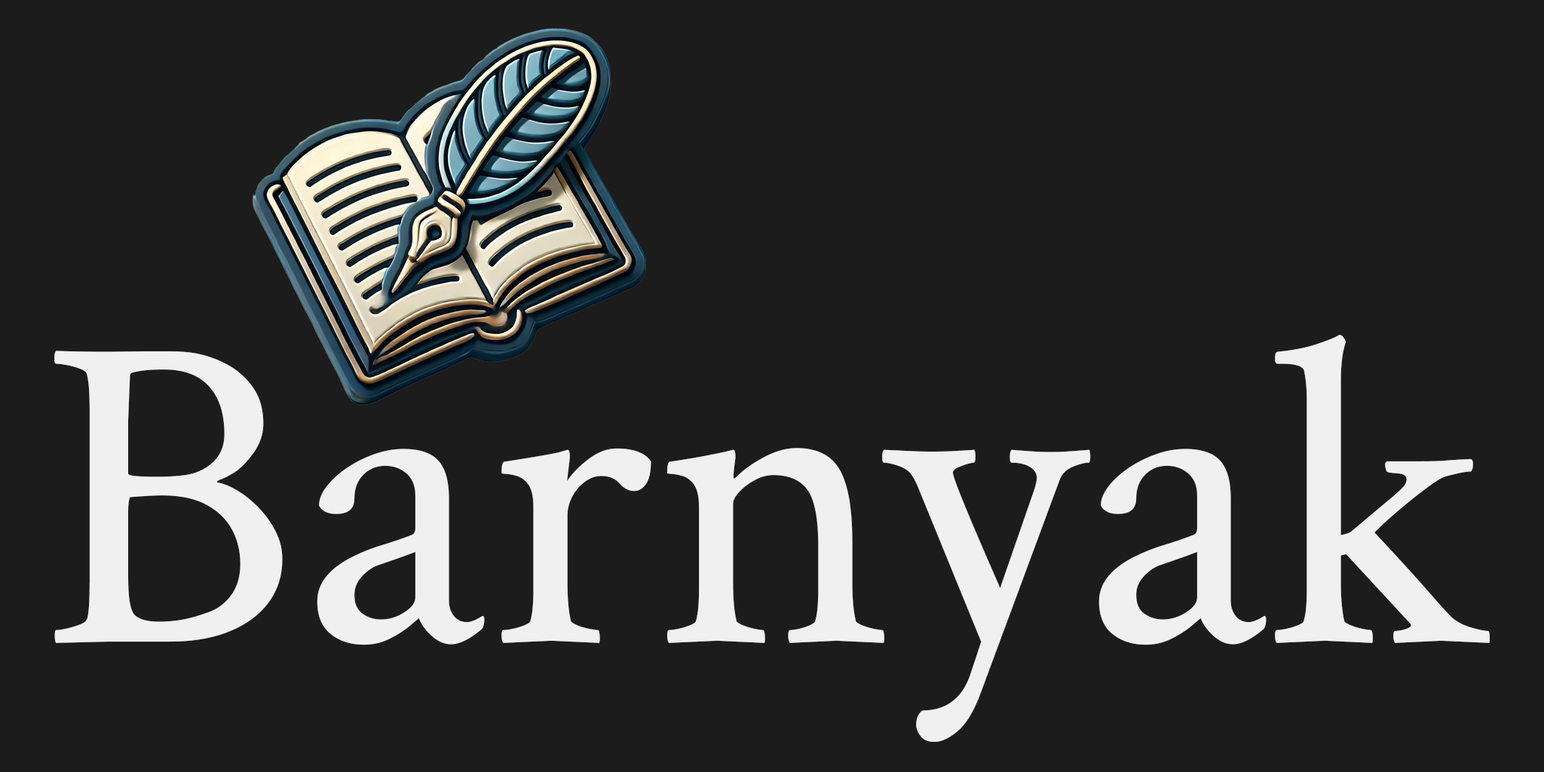
<style>
.page{position:relative;width:1544px;height:772px;background:#1c1c1c}
.page>*{position:absolute;margin:0}
.t1{font:452.4px "CrimsonText-Regular";color:#f0f0f0}
</style>
<div class="page">
<p class="t1" style="left:54px;top:335px;width:1436px;height:407px">Barnyak</p>
</div>
